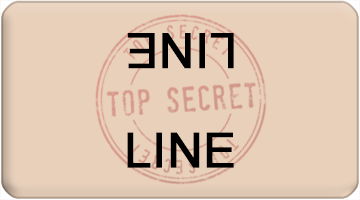
<style>
.page{position:relative;width:360px;height:200px;background:#e8d0bb}
.page>*{position:absolute;margin:0}
.t1{font:48px "ArialMT";color:#000000;font-weight:bold}
</style>
<div class="page">
<p class="t1" style="left:127px;top:33px;width:107px;height:36px;rotate:180deg">LINE</p>
<p class="t1" style="left:127px;top:132px;width:107px;height:36px">LINE</p>
</div>
